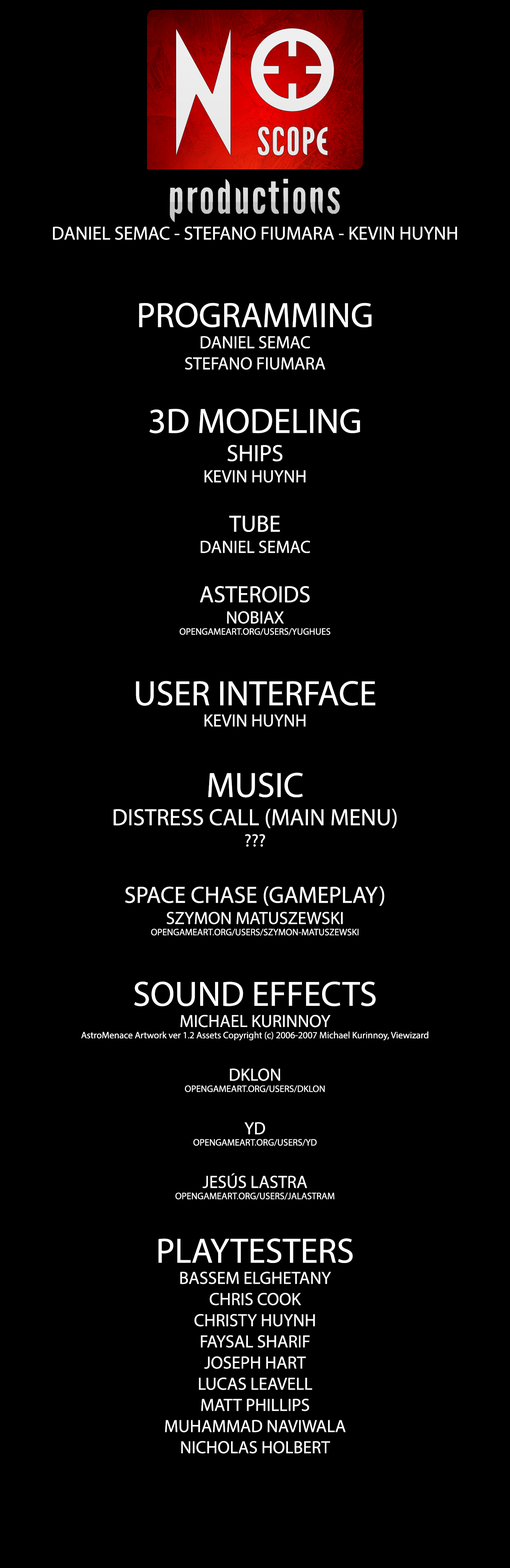
<style>
.page{position:relative;width:510px;height:1568px;background:#000000}
.page>*{position:absolute;margin:0}
.t1{font:17.6px "MyriadPro-Regular";color:#ffffff}
.t2{font:18.8px "MyriadPro-Regular";color:#ffffff}
.t3{font:35.3px "MyriadPro-Regular";color:#ffffff}
.t4{font:23.5px "MyriadPro-Regular";color:#ffffff}
.t5{font:9.4px "MyriadPro-Regular";color:#ffffff}
</style>
<div class="page">
<p class="t1" style="left:53px;top:227px;width:404px;height:1227px;text-align:center"><span class="t2">DANIEL SEMAC - STEFANO FIUMARA - KEVIN HUYNH<br><br><br></span><span class="t3">PROGRAMMING<br></span>DANIEL SEMAC<br>STEFANO FIUMARA<br><br><span class="t3">3D MODELING<br></span><span class="t4">SHIPS<br></span>KEVIN HUYNH<br><br><span class="t4">TUBE<br></span>DANIEL SEMAC<br><br><span class="t4">ASTEROIDS<br></span>NOBIAX <br><span class="t5">OPENGAMEART.ORG/USERS/YUGHUES<br><br></span><span class="t3">USER INTERFACE<br></span>KEVIN HUYNH<br><br><span class="t3">MUSIC<br></span><span class="t4">DISTRESS CALL (MAIN MENU)<br></span>???<br><span class="t4"><br>SPACE CHASE (GAMEPLAY)<br></span>SZYMON MATUSZEWSKI <br><span class="t5">OPENGAMEART.ORG/USERS/SZYMON-MATUSZEWSKI<br><br></span><span class="t3">SOUND EFFECTS<br></span>MICHAEL KURINNOY <br><span class="t5">AstroMenace Artwork ver 1.2 Assets Copyright (c) 2006-2007 Michael Kurinnoy, Viewizard<br></span><br>DKLON<br><span class="t5">OPENGAMEART.ORG/USERS/DKLON<br></span><br>YD <br><span class="t5">OPENGAMEART.ORG/USERS/YD<br></span><br>JESÚS LASTRA <br><span class="t5">OPENGAMEART.ORG/USERS/JALASTRAM<br><br></span><span class="t3">PLAYTESTERS<br></span>BASSEM ELGHETANY<br>CHRIS COOK<br>CHRISTY HUYNH<br>FAYSAL SHARIF<br>JOSEPH HART<br>LUCAS LEAVELL<br>MATT PHILLIPS<br>MUHAMMAD NAVIWALA<br>NICHOLAS HOLBERT</p>
</div>
